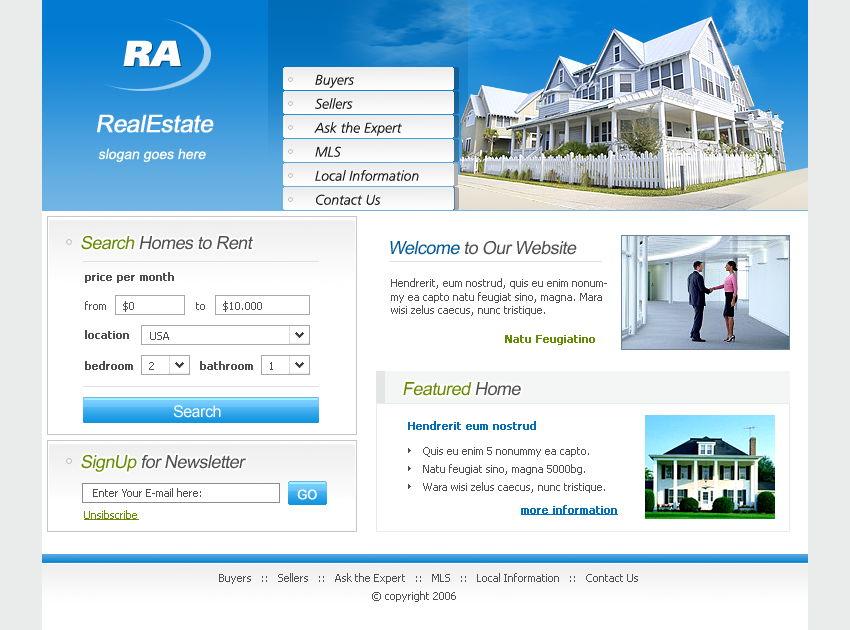
<style>
.page{position:relative;width:850px;height:630px;background:#ffffff}
.page>*{position:absolute;margin:0}
.t1{font:36px "AGForeignerULBObliqueMedium";color:#ffffff}
.t2{font:14px/24px "AGForeignerLightItalicMedium";color:#1f1f1f}
.t3{font:24px "ArialMT";letter-spacing:-0.03em;color:#ffffff;font-weight:bold;font-style:italic}
.t4{font:14px "ArialMT";color:#ffffff;font-style:italic}
.t5{font:18px "ArialMT";letter-spacing:-0.03em;color:#4f4f4f;font-style:italic}
.t6{font:18px "ArialMT";letter-spacing:-0.03em;color:#658b00;font-style:italic}
.t7{font:18px "ArialMT";letter-spacing:-0.03em;color:#005a99;font-style:italic}
.t8{font:11px "Tahoma";color:#4f4f4f;font-weight:bold}
.t9{font:11px "Tahoma";color:#4f4f4f}
.t10{font:11px "Tahoma";color:#658b00;font-weight:bold}
.t11{font:16px "ArialMT";letter-spacing:-0.03em;color:#ffffff}
.t12{font:11px "Tahoma";color:#006ebb;font-weight:bold}
.t13{font:11px/18px "Tahoma";color:#4f4f4f}
.t14{font:13px "ArialMT";letter-spacing:-0.03em;color:#ffffff;font-weight:bold}
.t15{font:11px "Tahoma";color:#658b00;text-decoration:underline}
.t16{font:11px "Tahoma";color:#006ebb;font-weight:bold;text-decoration:underline}
</style>
<div class="page">
<p class="t1" style="left:123px;top:40px;width:58px;height:27px">RA</p>
<p class="t2" style="left:314px;top:74px;width:105px;height:131px">Buyers<br>Sellers<br>Ask the Expert<br>MLS<br>Local Information<br>Contact Us</p>
<p class="t3" style="left:97px;top:114px;width:117px;height:19px">RealEstate</p>
<p class="t4" style="left:98px;top:148px;width:108px;height:14px">slogan goes here</p>
<p class="t5" style="left:81px;top:236px;width:172px;height:14px"><span class="t6">Search</span> Homes to Rent</p>
<p class="t5" style="left:390px;top:241px;width:187px;height:14px"><span class="t7">Welcome</span> to Our Website</p>
<p class="t8" style="left:85px;top:272px;width:89px;height:11px">price per month</p>
<p class="t9" style="left:391px;top:278px;width:216px;height:38px">Hendrerit, eum nostrud, quis eu enim nonummy ea capto natu feugiat sino, magna. Mara wisi zelus caecus, nunc tristique.</p>
<p class="t9" style="left:85px;top:301px;width:21px;height:9px">from</p>
<p class="t9" style="left:123px;top:301px;width:11px;height:11px">$0</p>
<p class="t9" style="left:196px;top:302px;width:9px;height:8px">to</p>
<p class="t9" style="left:223px;top:301px;width:39px;height:11px">$10.000</p>
<p class="t8" style="left:85px;top:330px;width:44px;height:9px">location</p>
<p class="t9" style="left:150px;top:332px;width:19px;height:8px">USA</p>
<p class="t10" style="left:505px;top:335px;width:90px;height:10px">Natu Feugiatino</p>
<p class="t8" style="left:85px;top:361px;width:48px;height:9px">bedroom</p>
<p class="t9" style="left:149px;top:362px;width:5px;height:8px">2</p>
<p class="t8" style="left:200px;top:361px;width:53px;height:9px">bathroom</p>
<p class="t9" style="left:270px;top:362px;width:3px;height:8px">1</p>
<p class="t6" style="left:403px;top:382px;width:118px;height:14px">Featured<span class="t5"> Home</span></p>
<p class="t11" style="left:173px;top:405px;width:48px;height:13px">Search</p>
<p class="t12" style="left:408px;top:421px;width:128px;height:9px">Hendrerit eum nostrud</p>
<p class="t13" style="left:423px;top:447px;width:182px;height:46px">Quis eu enim 5 nonummy ea capto.<br>Natu feugiat sino, magna 5000bg. <br>Wara wisi zelus caecus, nunc tristique.</p>
<p class="t5" style="left:81px;top:455px;width:165px;height:17px"><span class="t6">SignUp</span> for Newsletter</p>
<p class="t9" style="left:93px;top:488px;width:108px;height:9px">Enter Your E-mail here:</p>
<p class="t14" style="left:297px;top:489px;width:20px;height:11px">GO</p>
<p class="t15" style="left:84px;top:510px;width:55px;height:10px">Unsibscribe</p>
<p class="t16" style="left:521px;top:505px;width:97px;height:10px">more information</p>
<p class="t9" style="left:219px;top:573px;width:419px;height:11px">Buyers   ::   Sellers   ::   Ask the Expert   ::   MLS   ::   Local Information   ::   Contact Us</p>
<p class="t9" style="left:372px;top:591px;width:84px;height:11px">© copyright 2006</p>
</div>
